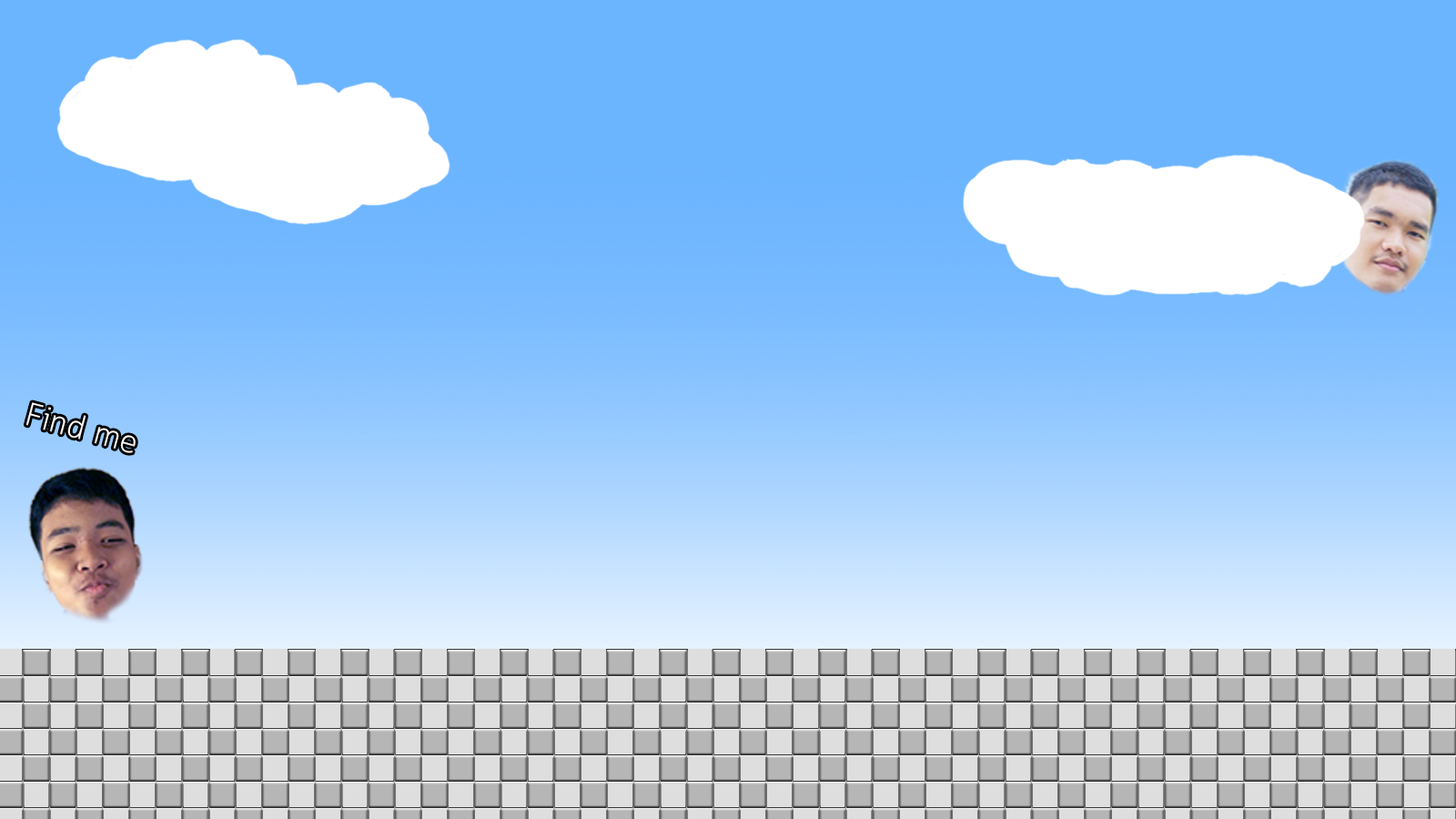
<style>
.page{position:relative;width:1456px;height:819px}
.page>*{position:absolute;margin:0}
.t1{font:32.7px "Cloud-Light";color:#ffffff}
</style>
<div class="page">
<p class="t1" style="left:25px;top:402px;width:111px;height:51px;rotate:15deg">Find me</p>
</div>
